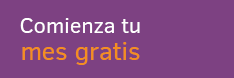
<style>
.page{position:relative;width:234px;height:78px;background:#7d4182}
.page>*{position:absolute;margin:0}
.t1{font:21.9px/27px "ClearSans";color:#ffffff}
.t2{font:25.5px/27px "ClearSans";color:#f48e21}
</style>
<div class="page">
<p class="t1" style="left:20px;top:18px;width:120px;height:47px;text-align:center">Comienza tu<br><span class="t2">mes gratis</span></p>
</div>
